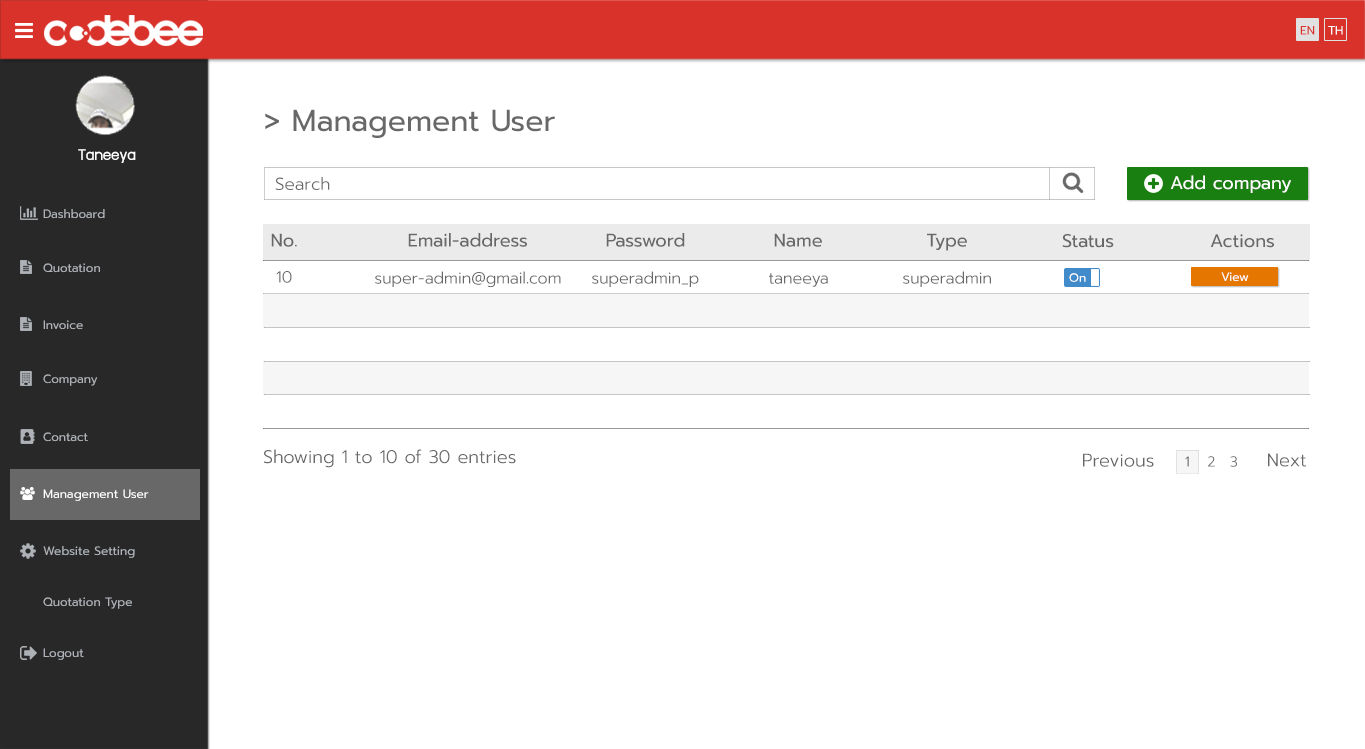
<style>
.page{position:relative;width:1365px;height:749px;background:#ffffff}
.page>*{position:absolute;margin:0}
.t1{font:12px "Prompt-Regular";color:#d8322b}
.t2{font:12px "Prompt-Regular";color:#ffffff}
.t3{font:30px "Prompt-Regular";color:#686868}
.t4{font:18px "supermarket";color:#ffffff}
.t5{font:17px "Prompt-Light";color:#686868}
.t6{font:18px "Prompt-Regular";color:#ffffff}
.t7{font:12px "Prompt-Regular";color:#aeb2b7}
.t8{font:18px "Prompt-Regular";color:#686868}
.t9{font:16px "Prompt-Light";color:#686868}
.t10{font:18px "Prompt-Light";color:#686868}
.t11{font:14px "Prompt-Light";color:#686868}
</style>
<div class="page">
<p class="t1" style="left:1300px;top:26px;width:15px;height:9px">EN</p>
<p class="t2" style="left:1328px;top:26px;width:15px;height:9px">TH</p>
<p class="t3" style="left:265px;top:109px;width:290px;height:29px">&gt; Management User</p>
<p class="t4" style="left:78px;top:149px;width:58px;height:14px">Taneeya</p>
<p class="t5" style="left:275px;top:177px;width:55px;height:13px">Search</p>
<p class="t6" style="left:1170px;top:175px;width:121px;height:18px">Add company</p>
<p class="t7" style="left:43px;top:209px;width:62px;height:10px">Dashboard</p>
<p class="t8" style="left:271px;top:233px;width:26px;height:14px">No.</p>
<p class="t8" style="left:408px;top:233px;width:119px;height:14px">Email-address</p>
<p class="t8" style="left:606px;top:233px;width:79px;height:14px">Password</p>
<p class="t8" style="left:774px;top:233px;width:48px;height:14px">Name</p>
<p class="t8" style="left:927px;top:233px;width:40px;height:18px">Type</p>
<p class="t8" style="left:1062px;top:234px;width:52px;height:14px">Status</p>
<p class="t8" style="left:1210px;top:234px;width:64px;height:14px">Actions</p>
<p class="t7" style="left:43px;top:263px;width:57px;height:10px">Quotation</p>
<p class="t9" style="left:276px;top:271px;width:16px;height:12px">10</p>
<p class="t9" style="left:375px;top:271px;width:186px;height:17px">super-admin@gmail.com</p>
<p class="t9" style="left:592px;top:271px;width:107px;height:16px">superadmin_p</p>
<p class="t9" style="left:769px;top:273px;width:59px;height:14px">taneeya</p>
<p class="t9" style="left:903px;top:271px;width:88px;height:16px">superadmin</p>
<p class="t2" style="left:1069px;top:273px;width:17px;height:9px">On</p>
<p class="t2" style="left:1221px;top:272px;width:28px;height:10px">View</p>
<p class="t7" style="left:43px;top:320px;width:40px;height:10px">Invoice</p>
<p class="t7" style="left:43px;top:374px;width:55px;height:12px">Company</p>
<p class="t7" style="left:43px;top:432px;width:45px;height:10px">Contact</p>
<p class="t10" style="left:264px;top:449px;width:252px;height:19px">Showing 1 to 10 of 30 entries</p>
<p class="t10" style="left:1083px;top:453px;width:71px;height:14px">Previous</p>
<p class="t11" style="left:1185px;top:456px;width:4px;height:11px">1</p>
<p class="t11" style="left:1208px;top:456px;width:7px;height:11px">2</p>
<p class="t11" style="left:1230px;top:456px;width:7px;height:11px">3</p>
<p class="t10" style="left:1268px;top:453px;width:38px;height:14px">Next</p>
<p class="t2" style="left:43px;top:489px;width:106px;height:12px">Management User</p>
<p class="t7" style="left:43px;top:546px;width:92px;height:12px">Website Setting</p>
<p class="t7" style="left:43px;top:597px;width:89px;height:12px">Quotation Type</p>
<p class="t7" style="left:43px;top:648px;width:41px;height:12px">Logout</p>
</div>
